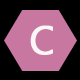
<style>
.page{position:relative;width:80px;height:80px;background:#c878a0}
.page>*{position:absolute;margin:0}
.t1{font:40px "Gisha";letter-spacing:-0.05em;color:#f9f6f5;font-weight:bold}
</style>
<div class="page">
<p class="t1" style="left:30px;top:25px;width:23px;height:30px">C</p>
</div>
